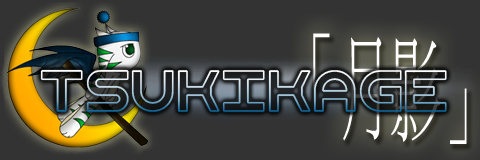
<style>
.page{position:relative;width:480px;height:160px;background:#333333}
.page>*{position:absolute;margin:0}
.t1{font:113.7px "MingLiU";scale:0.45 1}
.t2{font:56px "DouarOutline"}
</style>
<div class="page">
<p class="t1" style="left:313px;top:33px;width:154px;height:111px">「月影」</p>
<p class="t2" style="left:40px;top:69px;width:407px;height:43px">Tsukikage</p>
</div>
